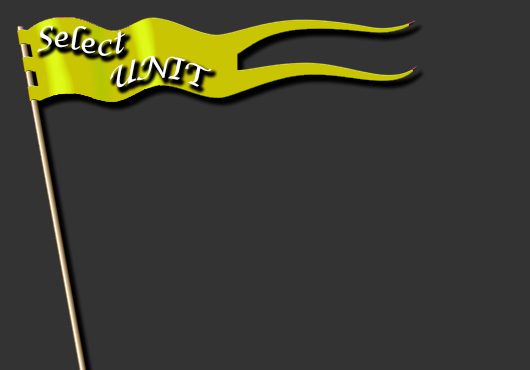
<style>
.page{position:relative;width:530px;height:370px;background:#333333}
.page>*{position:absolute;margin:0}
.t1{font:30px "LucidaCalligraphy-Italic";color:#ffffff}
</style>
<div class="page">
<p class="t1" style="left:37px;top:25px;width:89px;height:31px;rotate:-4deg">Select</p>
<p class="t1" style="left:110px;top:55px;width:102px;height:33px">UNIT</p>
</div>
